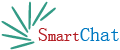
<style>
.page{position:relative;width:120px;height:50px;background:#ffffff}
.page>*{position:absolute;margin:0}
.t1{font:16px "LiSu";color:#b41d23}
.t2{font:20px "LiSu";color:#b41d23}
.t3{font:20px "LiSu";color:#0079c2}
</style>
<div class="page">
<p class="t1" style="left:38px;top:27px;width:81px;height:14px"><span class="t2">S</span>mart<span class="t3">Chat</span></p>
</div>
